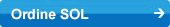
<style>
.page{position:relative;width:170px;height:27px;background:#0571bf}
.page>*{position:absolute;margin:0}
.t1{font:14px "Arial-BoldMT";color:#ffffff}
</style>
<div class="page">
<p class="t1" style="left:11px;top:8px;width:78px;height:12px">Ordine SOL</p>
</div>
